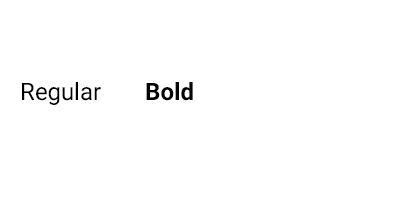
<style>
.page{position:relative;width:400px;height:200px;background:#ffffff}
.page>*{position:absolute;margin:0}
.t1{font:24px "Roboto-Regular";color:#000000}
.t2{font:24px "Roboto-Bold";color:#000000}
</style>
<div class="page">
<p class="t1" style="left:22px;top:82px;width:79px;height:23px">Regular</p>
<p class="t2" style="left:146px;top:82px;width:47px;height:19px">Bold</p>
</div>
